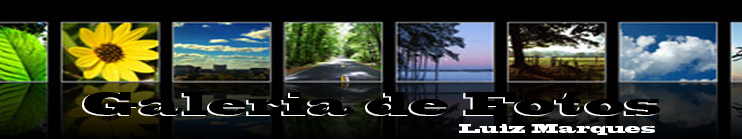
<style>
.page{position:relative;width:742px;height:139px;background:#000000}
.page>*{position:absolute;margin:0}
.t1{font:30px "BlackoakStd";color:#000000}
.t2{font:12px "BlackoakStd";color:#ffffff}
</style>
<div class="page">
<p class="t1" style="left:84px;top:92px;width:576px;height:23px">Galeria de Fotos</p>
<p class="t2" style="left:459px;top:124px;width:196px;height:11px">Luiz Marques</p>
</div>
